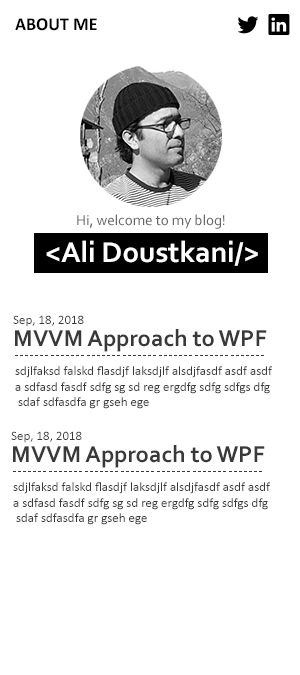
<style>
.page{position:relative;width:300px;height:675px;background:#ffffff}
.page>*{position:absolute;margin:0}
.t1{font:18px "Calibri-Bold";color:#000000}
.t2{font:15px "Corbel";color:#666666}
.t3{font:30px "Corbel-Bold";color:#fefefe}
.t4{font:13px "Calibri";color:#393939}
.t5{font:24px "Corbel-Bold";color:#393939}
</style>
<div class="page">
<p class="t1" style="left:15px;top:18px;width:82px;height:13px">ABOUT ME</p>
<p class="t2" style="left:77px;top:214px;width:148px;height:15px">Hi, welcome to my blog!</p>
<p class="t3" style="left:46px;top:240px;width:212px;height:26px">&lt;Ali Doustkani/&gt;</p>
<p class="t4" style="left:13px;top:315px;width:71px;height:12px">Sep, 18, 2018</p>
<p class="t5" style="left:15px;top:329px;width:252px;height:23px">MVVM Approach to WPF</p>
<p class="t4" style="left:15px;top:366px;width:257px;height:43px">sdjlfaksd falskd flasdjf laksdjlf alsdjfasdf asdf asdf<br>a sdfasd fasdf sdfg sg sd reg ergdfg sdfg sdfgs dfg <br> sdaf sdfasdfa gr gseh ege</p>
<p class="t4" style="left:11px;top:431px;width:71px;height:12px">Sep, 18, 2018</p>
<p class="t5" style="left:13px;top:445px;width:252px;height:23px">MVVM Approach to WPF</p>
<p class="t4" style="left:13px;top:482px;width:257px;height:43px">sdjlfaksd falskd flasdjf laksdjlf alsdjfasdf asdf asdf<br>a sdfasd fasdf sdfg sg sd reg ergdfg sdfg sdfgs dfg <br> sdaf sdfasdfa gr gseh ege</p>
</div>
